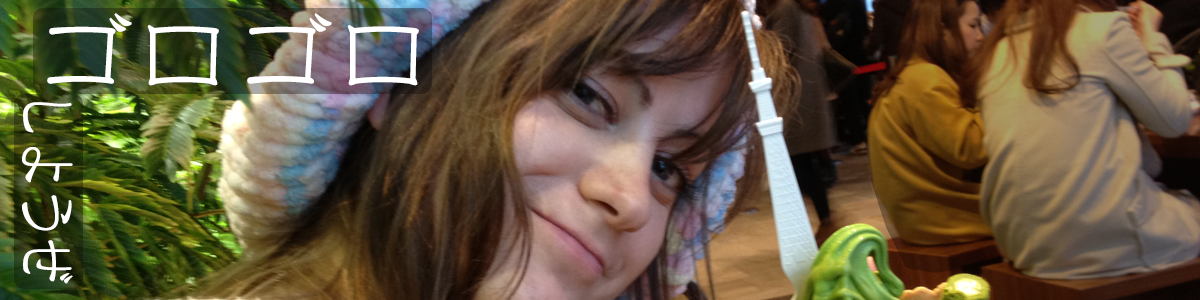
<style>
.page{position:relative;width:1200px;height:300px}
.page>*{position:absolute;margin:0}
.t1{font:100px "Reishoreiryu";color:#ffffff}
.t2{font:68.9px "Reishoreiryu";color:#ffffff;scale:0.7 1}
</style>
<div class="page">
<p class="t1" style="left:47px;top:13px;width:372px;height:73px">ゴロゴロ</p>
<p class="t2" style="left:22px;top:102px;width:51px;height:182px;rotate:90deg">しようぜ</p>
</div>
